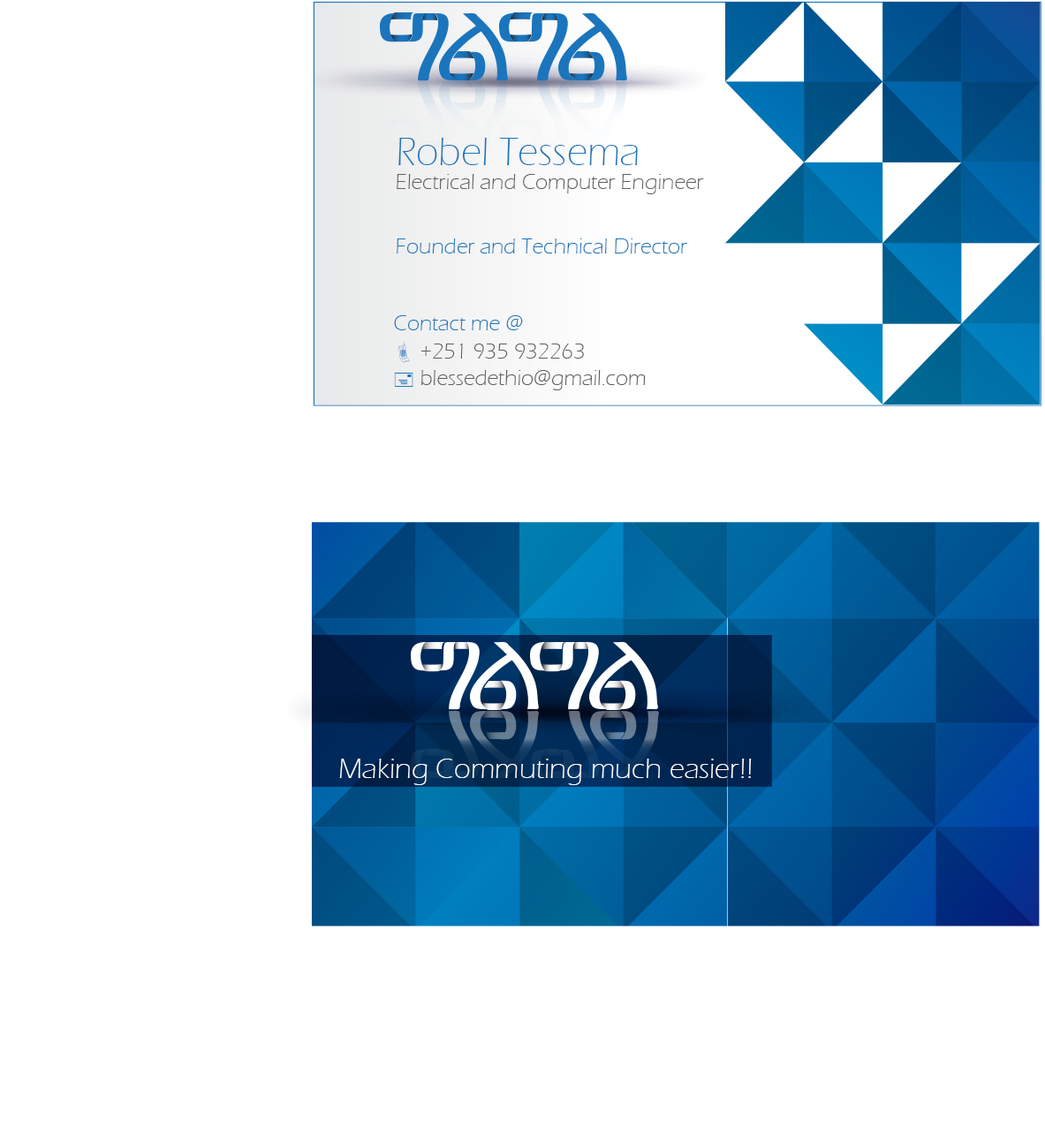
<style>
.page{position:relative;width:1045px;height:1141px;background:#ffffff}
.page>*{position:absolute;margin:0}
.t1{font:40.2px "ErasITC-Light";color:#1b75bc}
.t2{font:22.1px "ErasITC-Light";color:#5d5e61}
.t3{font:22.1px "ErasITC-Light";color:#1b75bc}
.t4{font:29.4px "ErasITC-Light";color:#ffffff}
</style>
<div class="page">
<p class="t1" style="left:398px;top:138px;width:240px;height:27px">Robel Tessema</p>
<p class="t2" style="left:397px;top:174px;width:307px;height:20px">Electrical and Computer Engineer</p>
<p class="t3" style="left:397px;top:238px;width:290px;height:15px">Founder and Technical Director</p>
<p class="t3" style="left:394px;top:315px;width:129px;height:15px">Contact me @</p>
<p class="t2" style="left:420px;top:344px;width:226px;height:46px">+251 935 932263<br>blessedethio@gmail.com</p>
<p class="t4" style="left:339px;top:759px;width:413px;height:26px">Making Commuting much easier!!</p>
</div>
